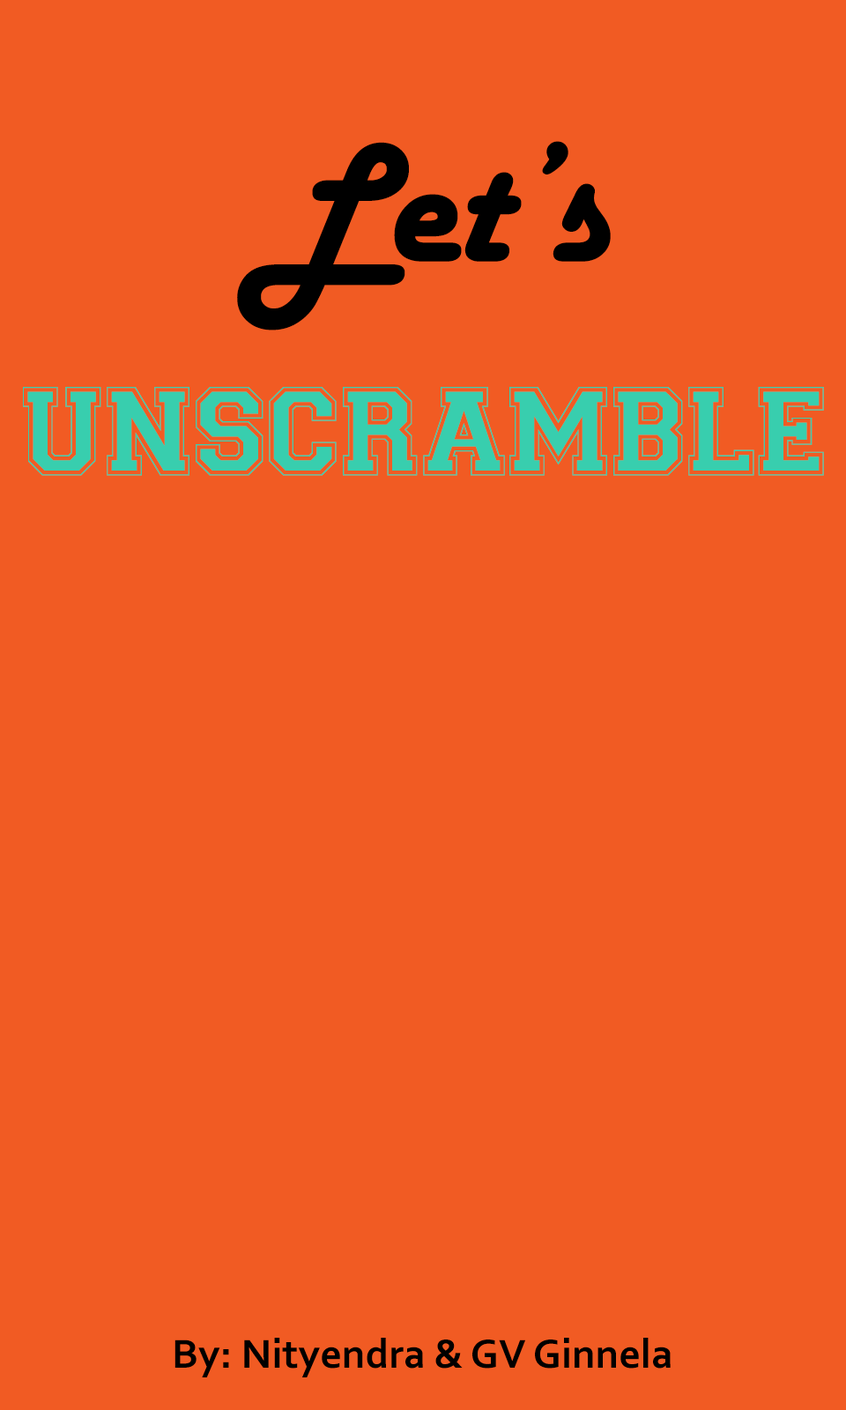
<style>
.page{position:relative;width:846px;height:1410px;background:#f15b23}
.page>*{position:absolute;margin:0}
.t1{font:176.2px "HarlowSolid";color:#000000}
.t2{font:105.7px "Collegiate-Normal";color:#38ceae}
.t3{font:42.3px "Corbel-Bold";color:#000000}
</style>
<div class="page">
<p class="t1" style="left:237px;top:141px;width:374px;height:189px">Let’s</p>
<p class="t2" style="left:23px;top:387px;width:801px;height:89px">UNSCRAMBLE</p>
<p class="t3" style="left:174px;top:1337px;width:497px;height:40px">By: Nityendra &amp; GV Ginnela</p>
</div>
